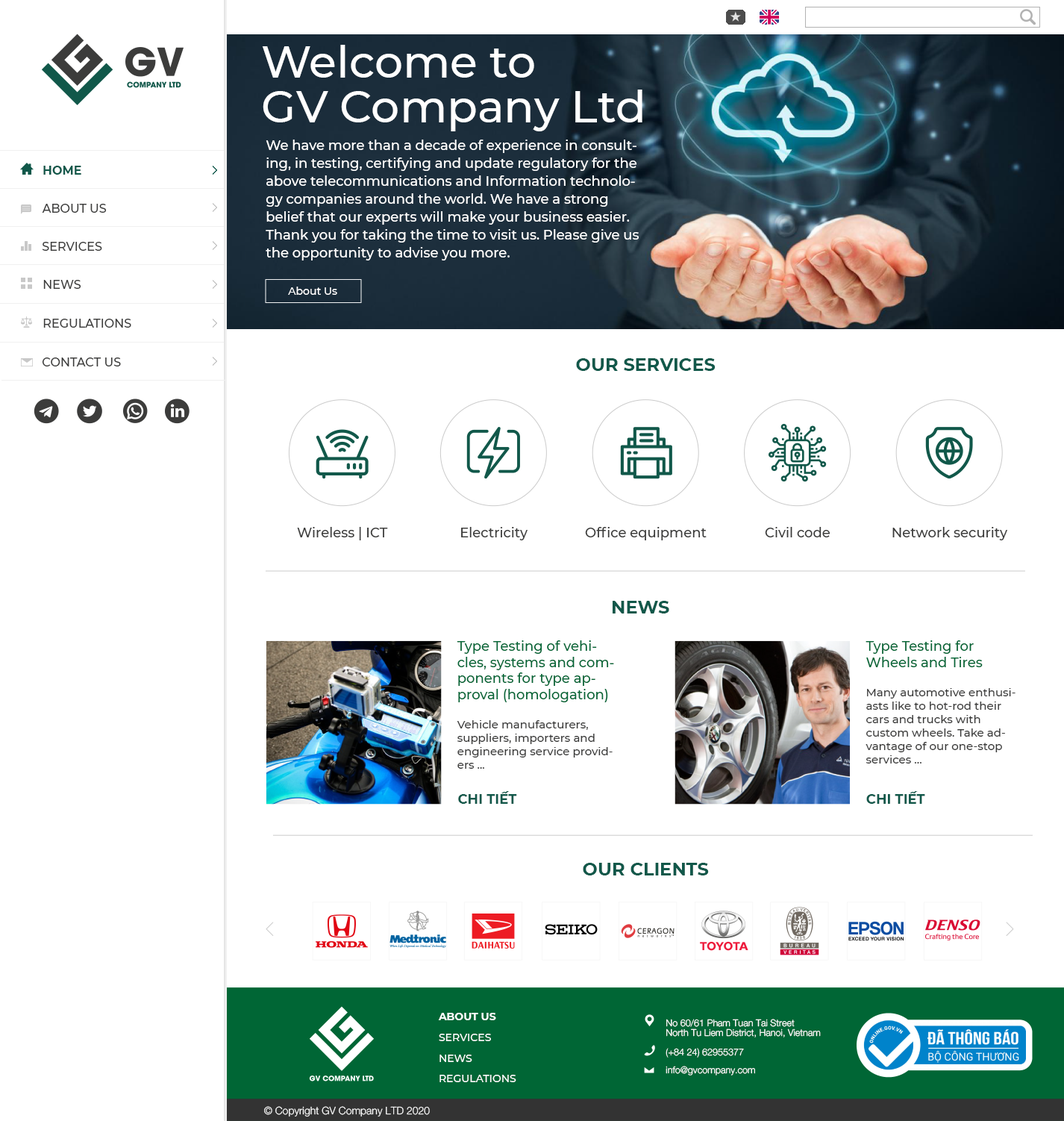
<style>
.page{position:relative;width:1064px;height:1121px;background:#ffffff}
.page>*{position:absolute;margin:0}
.t1{font:44.8px/44.8px "Montserrat-Medium";color:#ffffff}
.t2{font:13.4px/17.9px "Montserrat-Medium";color:#ffffff}
.t3{font:11.9px "Montserrat-Bold";color:#11584a}
.t4{font:11.9px "Montserrat-Medium";color:#3c3c3b}
.t5{font:10.4px "Montserrat-Medium";color:#ffffff}
.t6{font:17.9px "Montserrat-Bold";color:#11584a}
.t7{font:13.4px "Montserrat-Medium";color:#3c3c3b}
.t8{font:13.4px "Montserrat-Medium";color:#006635}
.t9{font:11.2px "Montserrat-Medium";color:#3c3c3b}
.t10{font:13.4px "Montserrat-Bold";color:#11584a}
.t11{font:10.4px "Montserrat-Bold";color:#ffffff}
.t12{font:9.4px/10.3px "Oxydesign-HE45-Light";color:#ffffff}
.t13{font:9.4px "Oxydesign-HE45-Light";color:#ffffff}
.t14{font:10.4px "Oxydesign-HE45-Light";color:#ffffff}
</style>
<div class="page">
<p class="t1" style="left:262px;top:45px;width:380px;height:86px">Welcome to<br>GV Company Ltd</p>
<p class="t2" style="left:266px;top:140px;width:373px;height:120px">We have more than a decade of experience in consulting, in testing, certifying and update regulatory for the above telecommunications and Information technology companies around the world. We have a strong belief that our experts will make your business easier.<br>Thank you for taking the time to visit us. Please give us the opportunity to advise you more.</p>
<p class="t3" style="left:43px;top:166px;width:38px;height:9px">HOME</p>
<p class="t4" style="left:42px;top:204px;width:65px;height:9px">ABOUT US</p>
<p class="t4" style="left:42px;top:242px;width:60px;height:9px">SERVICES</p>
<p class="t4" style="left:43px;top:280px;width:38px;height:9px">NEWS</p>
<p class="t5" style="left:288px;top:287px;width:49px;height:8px">About Us</p>
<p class="t4" style="left:43px;top:319px;width:88px;height:9px">REGULATIONS</p>
<p class="t4" style="left:42px;top:357px;width:79px;height:9px">CONTACT US</p>
<p class="t6" style="left:576px;top:358px;width:140px;height:13px">OUR SERVICES</p>
<p class="t7" style="left:297px;top:527px;width:91px;height:13px">Wireless | ICT</p>
<p class="t7" style="left:461px;top:527px;width:67px;height:13px">Electricity</p>
<p class="t7" style="left:585px;top:527px;width:122px;height:13px">Office equipment</p>
<p class="t7" style="left:765px;top:527px;width:65px;height:10px">Civil code</p>
<p class="t7" style="left:892px;top:527px;width:116px;height:13px">Network security</p>
<p class="t6" style="left:613px;top:601px;width:56px;height:12px">NEWS</p>
<p class="t8" style="left:457px;top:640px;width:157px;height:129px">Type Testing of vehicles, systems and components for type approval (homologation) <br><br><span class="t9">Vehicle manufacturers, suppliers, importers and engineering service providers ...</span></p>
<p class="t9" style="left:866px;top:640px;width:150px;height:123px"><span class="t8">Type Testing for Wheels and Tires<br><br></span>Many automotive enthusiasts like to hot-rod their cars and trucks with custom wheels. Take advantage of our one-stop services ...</p>
<p class="t10" style="left:458px;top:791px;width:59px;height:13px">CHI TIẾT</p>
<p class="t10" style="left:866px;top:791px;width:59px;height:13px">CHI TIẾT</p>
<p class="t6" style="left:583px;top:863px;width:126px;height:12px">OUR CLIENTS</p>
<p class="t11" style="left:438px;top:1013px;width:58px;height:7px">ABOUT US</p>
<p class="t12" style="left:666px;top:1018px;width:155px;height:19px">No 60/61 Pham Tuan Tai Street<br>North Tu Liem District, Hanoi, Vietnam</p>
<p class="t5" style="left:439px;top:1033px;width:52px;height:8px">SERVICES</p>
<p class="t13" style="left:666px;top:1048px;width:78px;height:9px">(+84 24) 62955377</p>
<p class="t5" style="left:439px;top:1054px;width:33px;height:8px">NEWS</p>
<p class="t13" style="left:666px;top:1065px;width:89px;height:10px">info@gvcompany.com</p>
<p class="t5" style="left:439px;top:1074px;width:77px;height:8px">REGULATIONS</p>
<p class="t14" style="left:264px;top:1106px;width:166px;height:11px">© Copyright GV Company LTD 2020</p>
</div>
